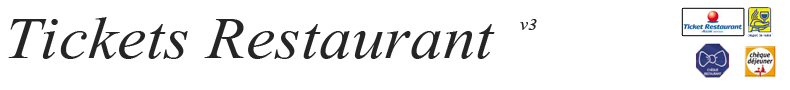
<style>
.page{position:relative;width:790px;height:90px;background:#ffffff}
.page>*{position:absolute;margin:0}
.t1{font:74px "Vijaya";color:#252525;scale:1.1 1}
.t2{font:21px "Vijaya";color:#252525;scale:1.1 1}
</style>
<div class="page">
<p class="t1" style="left:8px;top:17px;width:487px;height:42px">Tickets Restaurant</p>
<p class="t2" style="left:520px;top:19px;width:17px;height:11px">v3</p>
</div>
